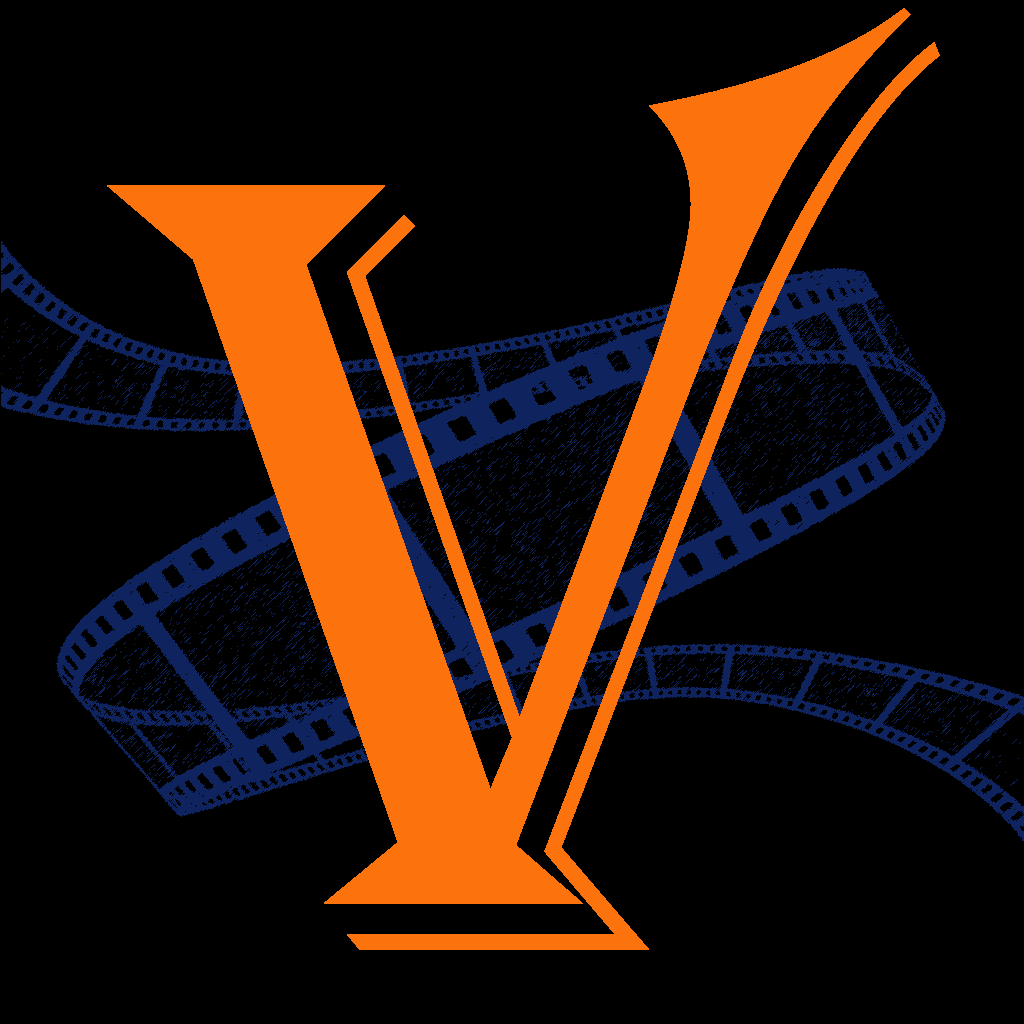
<style>
.page{position:relative;width:1024px;height:1024px;background:#000000}
.page>*{position:absolute;margin:0}
.t1{font:1146.4px "Algerian";color:#fc720d}
</style>
<div class="page">
<p class="t1" style="left:107px;top:8px;width:833px;height:942px">V</p>
</div>
